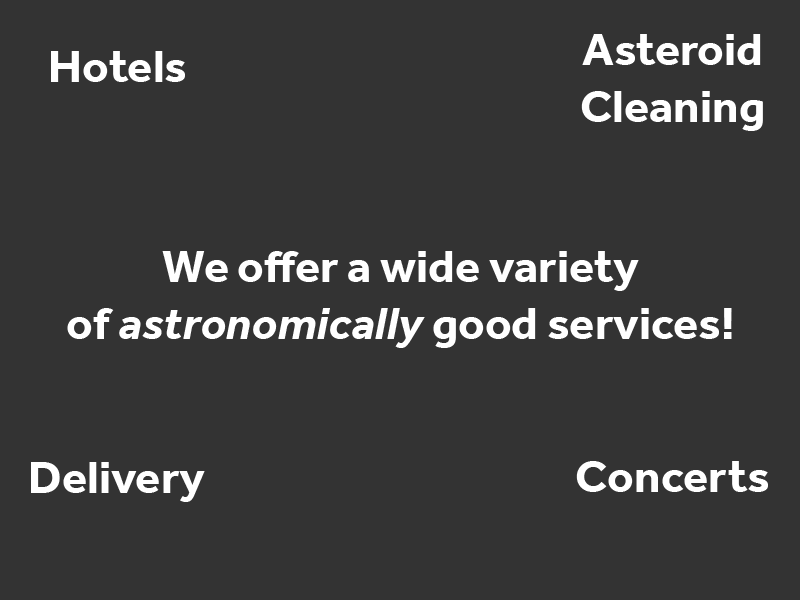
<style>
.page{position:relative;width:800px;height:600px;background:#333333}
.page>*{position:absolute;margin:0}
.t1{font:47.1px "Effra-Bold";color:#ffffff}
.t2{font:47.1px "Effra-BoldItalic";color:#ffffff}
</style>
<div class="page">
<p class="t1" style="left:581px;top:34px;width:182px;height:97px;text-align:center">Asteroid<br>Cleaning</p>
<p class="t1" style="left:51px;top:51px;width:134px;height:31px">Hotels</p>
<p class="t1" style="left:67px;top:251px;width:665px;height:97px;text-align:center">We offer a wide variety<br>of <span class="t2">astronomically</span> good services!</p>
<p class="t1" style="left:31px;top:462px;width:174px;height:40px">Delivery</p>
<p class="t1" style="left:576px;top:461px;width:192px;height:31px">Concerts</p>
</div>
